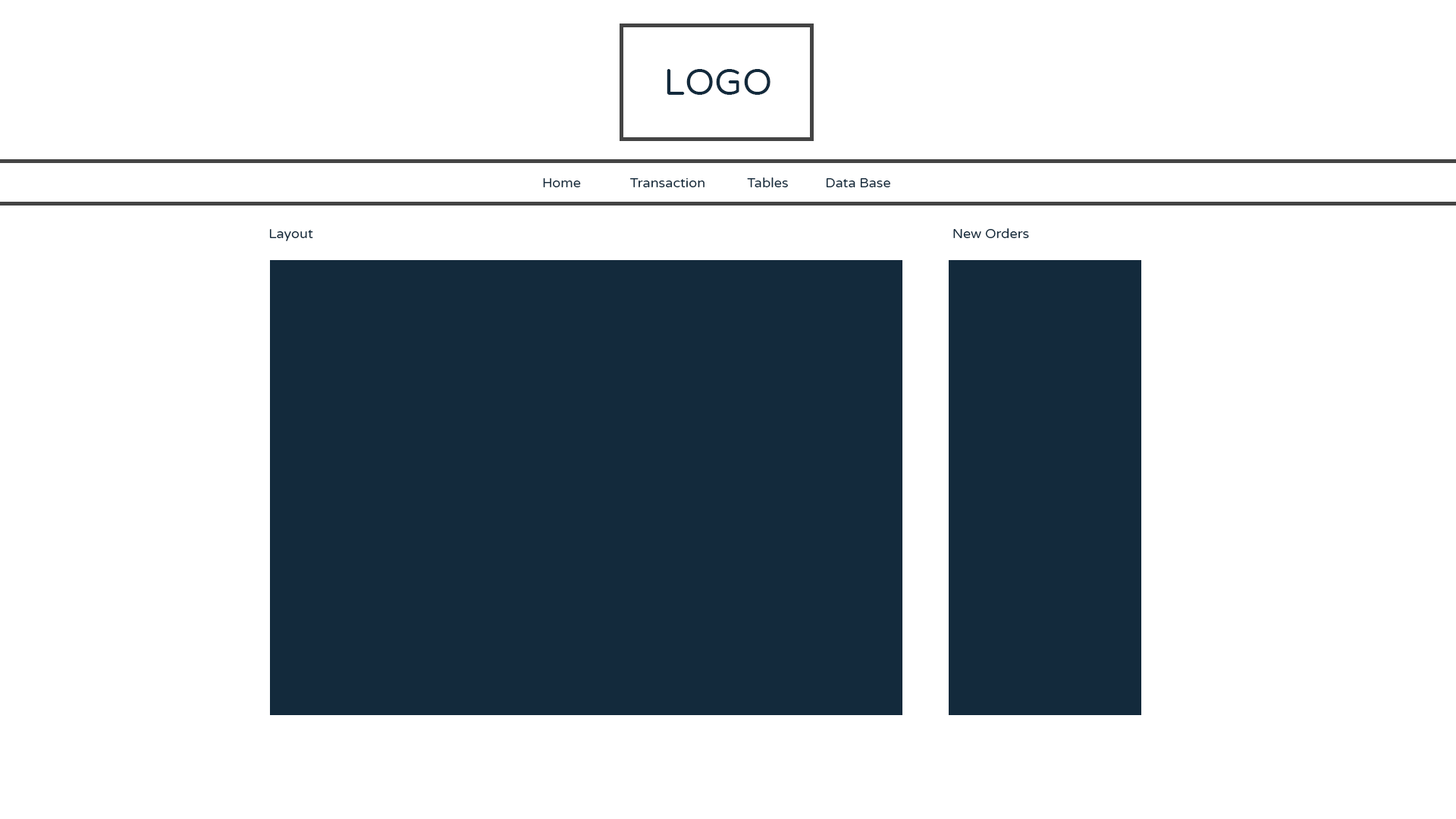
<style>
.page{position:relative;width:1456px;height:819px;background:#ffffff}
.page>*{position:absolute;margin:0}
.t1{font:36.8px "VarelaRound-Regular";color:#132a3c}
.t2{font:13.6px "VarelaRound-Regular";color:#132a3c}
</style>
<div class="page">
<p class="t1" style="left:667px;top:69px;width:103px;height:26px">LOGO</p>
<p class="t2" style="left:543px;top:178px;width:38px;height:9px">Home</p>
<p class="t2" style="left:630px;top:178px;width:74px;height:9px">Transaction</p>
<p class="t2" style="left:747px;top:177px;width:41px;height:10px">Tables</p>
<p class="t2" style="left:826px;top:178px;width:64px;height:9px">Data Base</p>
<p class="t2" style="left:269px;top:229px;width:44px;height:12px">Layout</p>
<p class="t2" style="left:953px;top:228px;width:76px;height:10px">New Orders</p>
</div>
